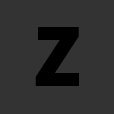
<style>
.page{position:relative;width:114px;height:114px;background:#333333}
.page>*{position:absolute;margin:0}
.t1{font:90px "SourceSansPro-Black";color:#000000}
</style>
<div class="page">
<p class="t1" style="left:35px;top:27px;width:44px;height:59px">Z</p>
</div>
